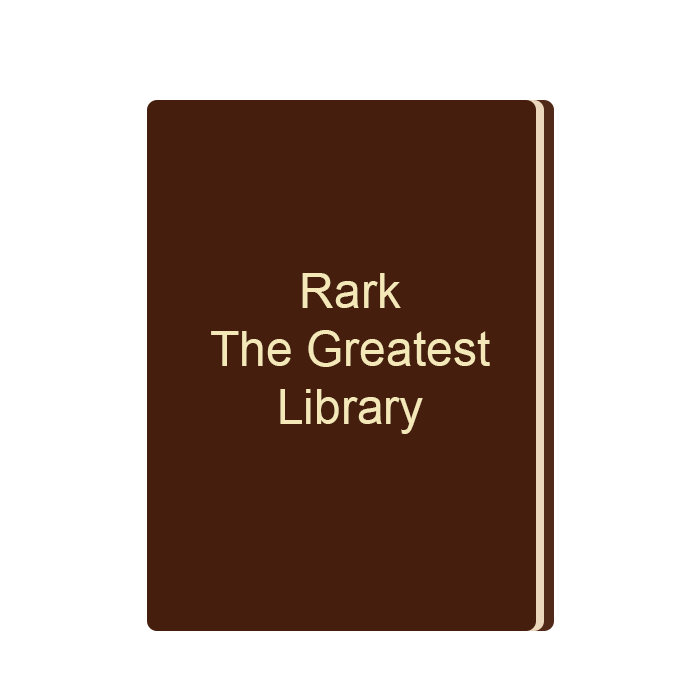
<style>
.page{position:relative;width:700px;height:700px;background:#ffffff}
.page>*{position:absolute;margin:0}
.t1{font:48px "ArialMT";color:#f4e8b8}
</style>
<div class="page">
<p class="t1" style="left:211px;top:273px;width:279px;height:161px;text-align:center">Rark<br>The Greatest<br>Library</p>
</div>
